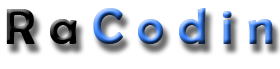
<style>
.page{position:relative;width:280px;height:69px;background:#ffffff}
.page>*{position:absolute;margin:0}
.t1{font:49.7px "BerlinSansFB-Reg";font-weight:bold}
</style>
<div class="page">
<p class="t1" style="left:6px;top:8px;width:267px;height:36px">R a C o d i n</p>
</div>
